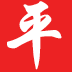
<style>
.page{position:relative;width:72px;height:72px;background:#ec2223}
.page>*{position:absolute;margin:0}
.t1{font:70px "FZXKFW--GB1-0";color:#ffffff;font-weight:bold}
</style>
<div class="page">
<p class="t1" style="left:7px;top:1px;width:55px;height:69px">平</p>
</div>
